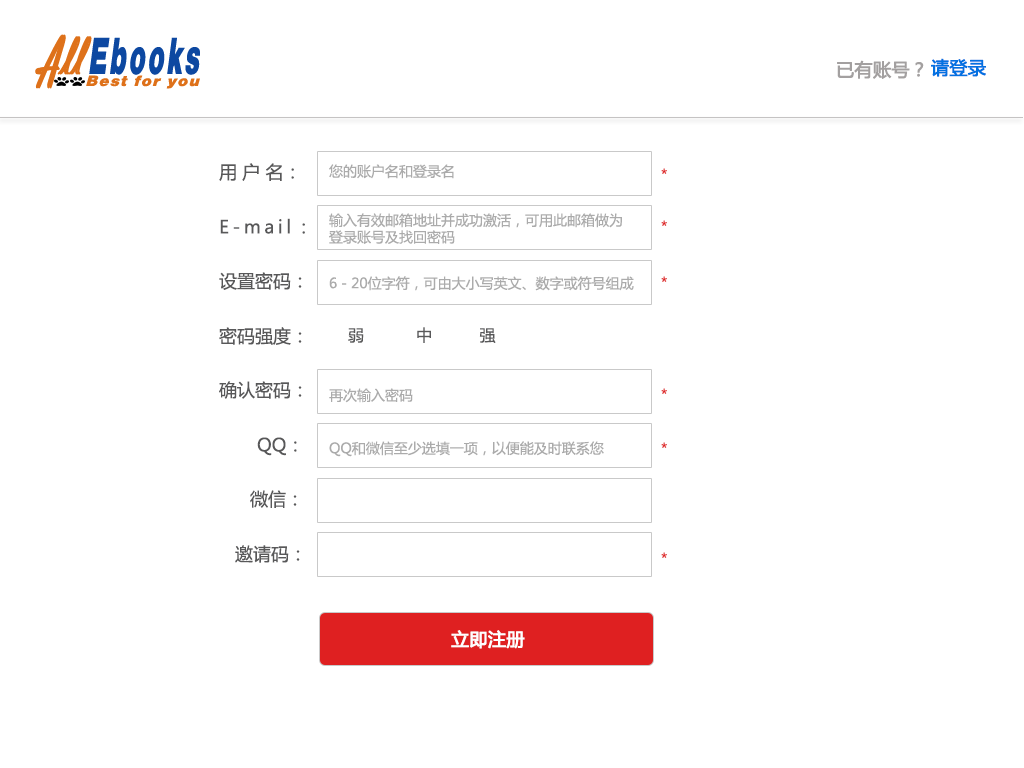
<style>
.page{position:relative;width:1024px;height:768px;background:#ffffff}
.page>*{position:absolute;margin:0}
.t1{font:18px "MicrosoftYaHei";color:#a3a0a0;font-weight:bold}
.t2{font:18px "MicrosoftYaHei";color:#0371e1;font-weight:bold}
.t3{font:18px "MicrosoftYaHei";color:#585859}
.t4{font:14px "MicrosoftYaHei";color:#ababab}
.t5{font:14px "MicrosoftYaHei";color:#df2021}
.t6{font:18px "MicrosoftYaHei";letter-spacing:0.2em;color:#585859}
.t7{font:16px "MicrosoftYaHei";color:#585859}
.t8{font:18px "MicrosoftYaHei";color:#fefefe;font-weight:bold}
</style>
<div class="page">
<p class="t1" style="left:837px;top:60px;width:87px;height:19px">已有账号？</p>
<p class="t2" style="left:931px;top:58px;width:55px;height:19px">请登录</p>
<p class="t3" style="left:219px;top:163px;width:75px;height:18px">用 户 名：</p>
<p class="t4" style="left:329px;top:164px;width:125px;height:15px">您的账户名和登录名</p>
<p class="t5" style="left:661px;top:168px;width:6px;height:6px">*</p>
<p class="t6" style="left:220px;top:218px;width:85px;height:16px">E-mail<span class="t3">：</span></p>
<p class="t4" style="left:329px;top:213px;width:293px;height:31px">输入有效邮箱地址并成功激活，可用此邮箱做为登录账号及找回密码</p>
<p class="t5" style="left:661px;top:220px;width:6px;height:6px">*</p>
<p class="t3" style="left:219px;top:272px;width:83px;height:18px">设置密码：</p>
<p class="t4" style="left:329px;top:276px;width:305px;height:15px">6－20位字符，可由大小写英文、数字或符号组成</p>
<p class="t5" style="left:661px;top:276px;width:6px;height:6px">*</p>
<p class="t3" style="left:219px;top:327px;width:83px;height:18px">密码强度：</p>
<p class="t7" style="left:348px;top:327px;width:148px;height:16px">弱           中          强</p>
<p class="t3" style="left:219px;top:381px;width:83px;height:18px">确认密码：</p>
<p class="t4" style="left:329px;top:388px;width:84px;height:15px">再次输入密码</p>
<p class="t5" style="left:661px;top:388px;width:6px;height:6px">*</p>
<p class="t3" style="left:257px;top:437px;width:40px;height:19px">QQ：</p>
<p class="t4" style="left:329px;top:441px;width:275px;height:16px">QQ和微信至少选填一项，以便能及时联系您</p>
<p class="t5" style="left:661px;top:442px;width:6px;height:6px">*</p>
<p class="t3" style="left:250px;top:490px;width:47px;height:18px">微信：</p>
<p class="t3" style="left:235px;top:545px;width:65px;height:18px">邀请码：</p>
<p class="t5" style="left:661px;top:552px;width:6px;height:6px">*</p>
<p class="t8" style="left:451px;top:630px;width:74px;height:19px">立即注册</p>
</div>
